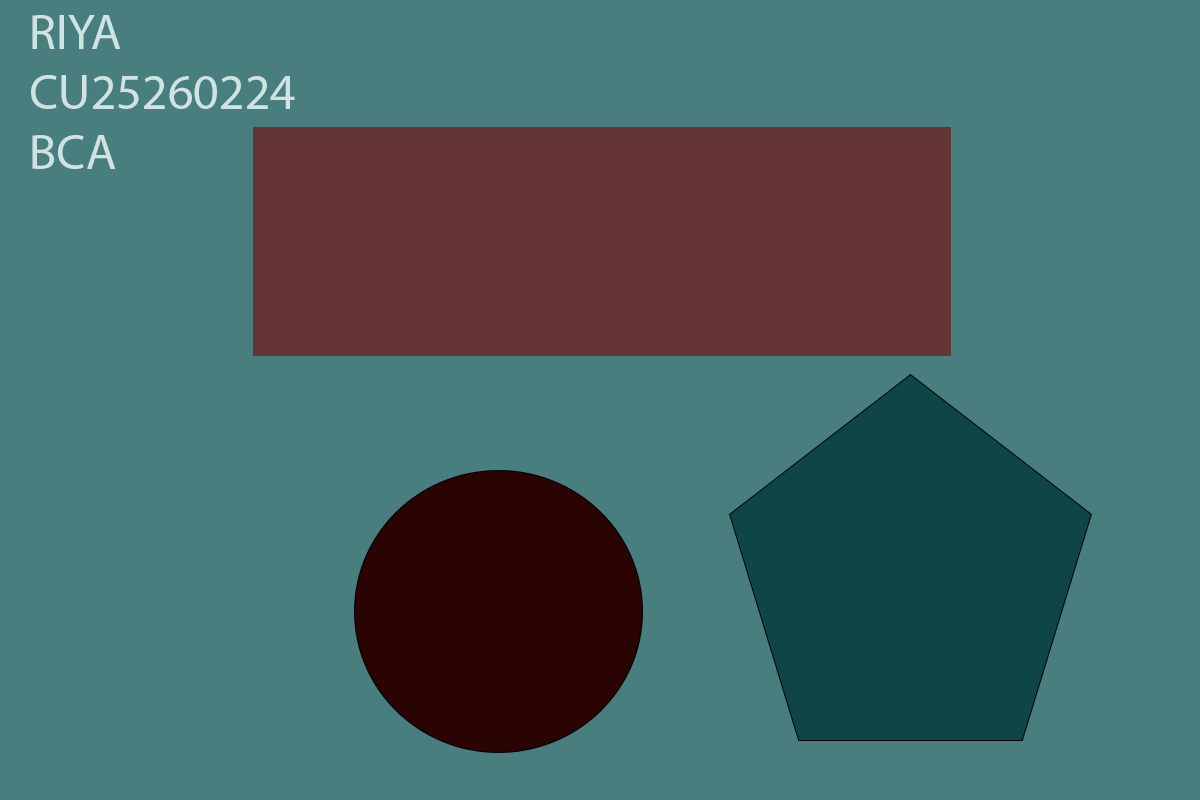
<style>
.page{position:relative;width:1200px;height:800px;background:#487e7e}
.page>*{position:absolute;margin:0}
.t1{font:50px "MyriadPro-Regular";color:#d0e3e3}
</style>
<div class="page">
<p class="t1" style="left:31px;top:15px;width:264px;height:154px">RIYA<br>CU25260224<br>BCA</p>
</div>
